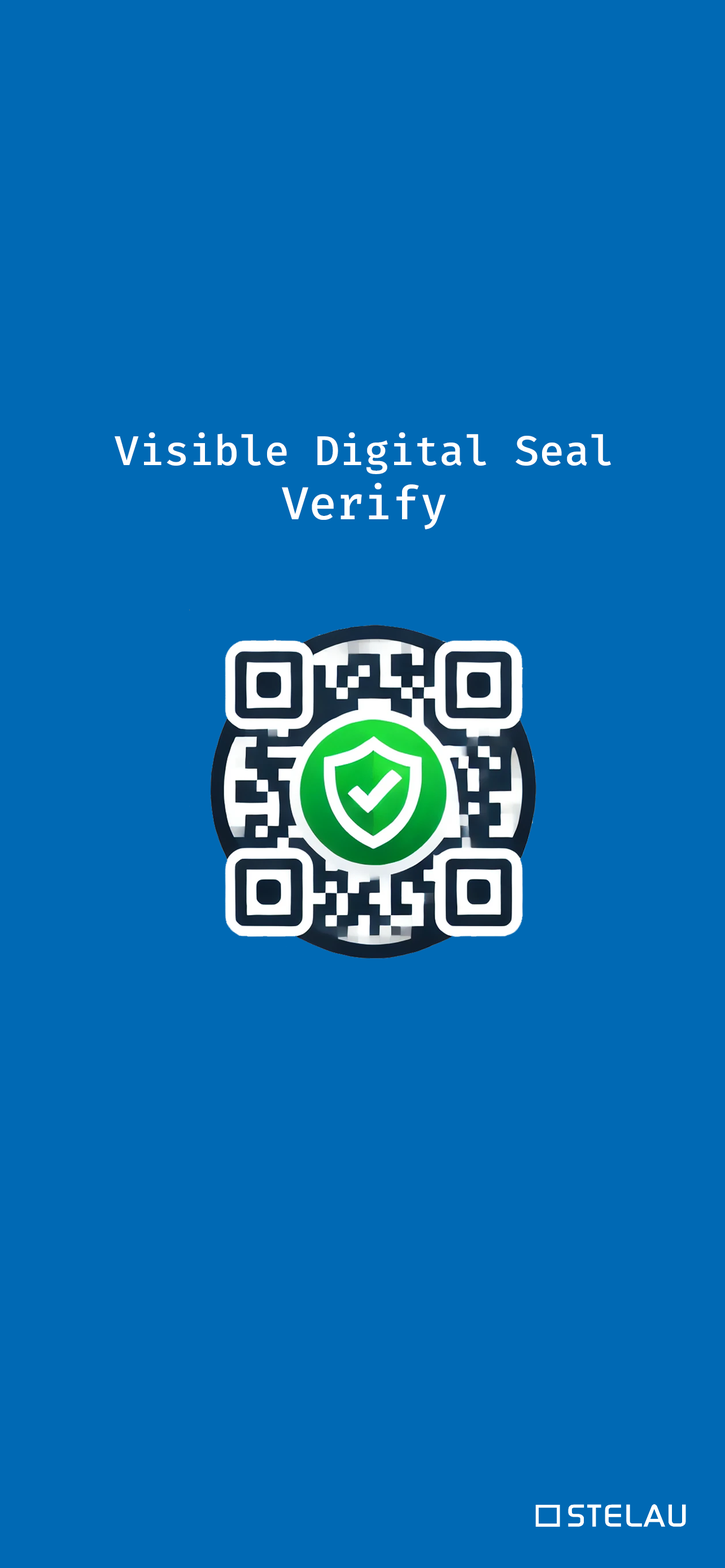
<style>
.page{position:relative;width:725px;height:1568px;background:#0069b4}
.page>*{position:absolute;margin:0}
.t1{font:40.6px "FiraCodeRoman-Medium";color:#ffffff}
.t2{font:45.2px "FiraCodeRoman-Medium";color:#ffffff}
</style>
<div class="page">
<p class="t1" style="left:115px;top:432px;width:496px;height:97px;text-align:center">Visible Digital Seal<br><span class="t2">Verify</span></p>
</div>
